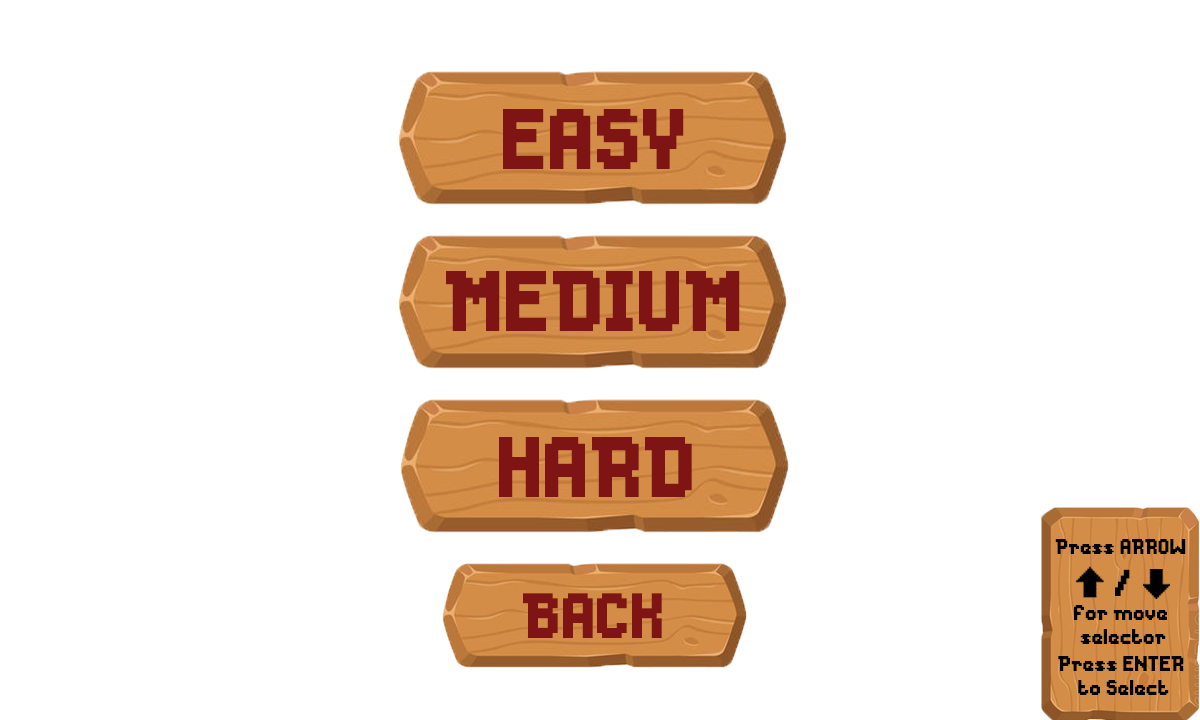
<style>
.page{position:relative;width:1200px;height:720px;background:#ffffff}
.page>*{position:absolute;margin:0}
.t1{font:80px "Messe-Duesseldorf";color:#7e1414}
.t2{font:20px "Messe-Duesseldorf";color:#000000}
.t3{font:34.9px "Messe-Duesseldorf";color:#000000}
.t4{font:59.6px "Messe-Duesseldorf";color:#7e1414}
</style>
<div class="page">
<p class="t1" style="left:503px;top:109px;width:181px;height:60px">EASY</p>
<p class="t1" style="left:446px;top:271px;width:294px;height:60px">MEDIUM</p>
<p class="t1" style="left:499px;top:437px;width:193px;height:60px">HARD</p>
<p class="t2" style="left:1055px;top:539px;width:131px;height:105px;text-align:center">Press ARROW <br><span class="t3">/<br></span>for move <br>selector</p>
<p class="t4" style="left:523px;top:593px;width:139px;height:45px">BACK</p>
<p class="t2" style="left:1058px;top:656px;width:126px;height:39px;text-align:center">Press ENTER <br>to Select</p>
</div>
